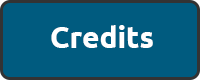
<style>
.page{position:relative;width:200px;height:80px;background:#005b7f}
.page>*{position:absolute;margin:0}
.t1{font:30px "Ubuntu-Bold";color:#ffffff}
</style>
<div class="page">
<p class="t1" style="left:51px;top:25px;width:102px;height:23px">Credits</p>
</div>
